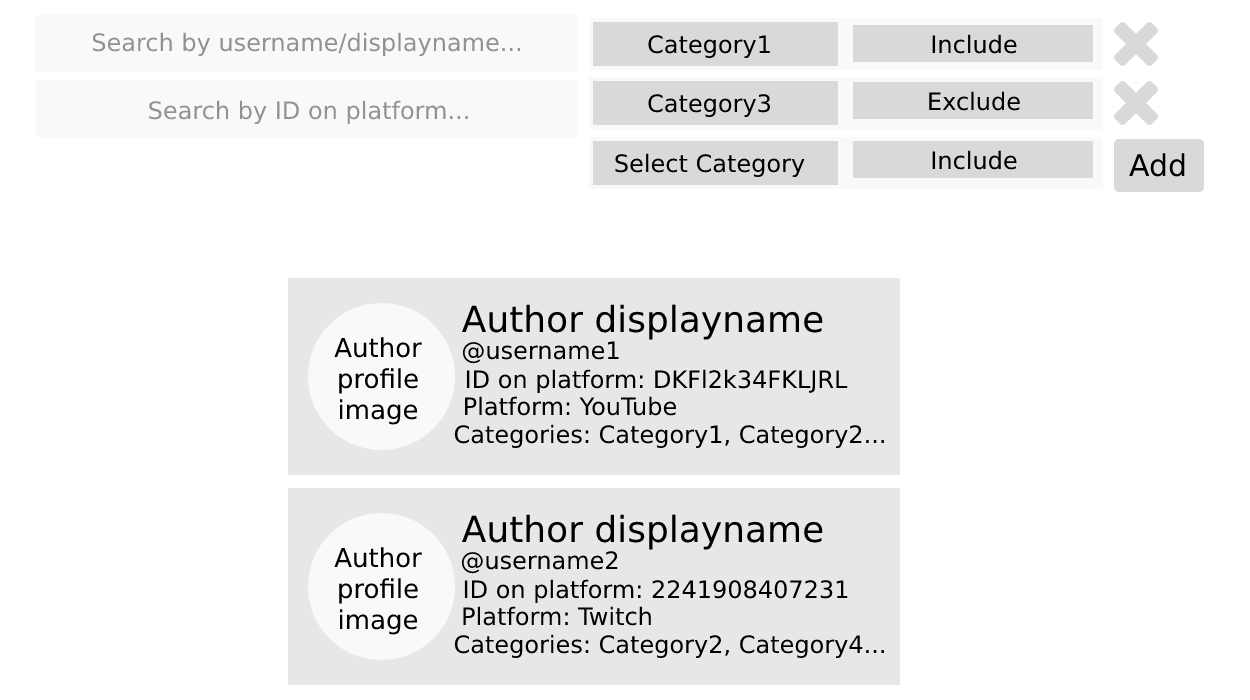
<style>
.page{position:relative;width:1250px;height:700px;background:#ffffff}
.page>*{position:absolute;margin:0}
.t1{font:24px "DejaVuSans";color:#929292}
.t2{font:24px "DejaVuSans";color:#000000}
.t3{font:30px "DejaVuSans";color:#000000}
.t4{font:36px "DejaVuSans";color:#000000}
.t5{font:26px "DejaVuSans";color:#000000}
</style>
<div class="page">
<p class="t1" style="left:92px;top:32px;width:429px;height:24px">Search by username/displayname...</p>
<p class="t2" style="left:648px;top:35px;width:122px;height:23px">Category1</p>
<p class="t2" style="left:932px;top:34px;width:85px;height:20px">Include</p>
<p class="t1" style="left:149px;top:100px;width:319px;height:24px">Search by ID on platform...</p>
<p class="t2" style="left:648px;top:94px;width:123px;height:23px">Category3</p>
<p class="t2" style="left:929px;top:91px;width:91px;height:20px">Exclude</p>
<p class="t2" style="left:932px;top:150px;width:85px;height:20px">Include</p>
<p class="t2" style="left:615px;top:153px;width:190px;height:24px">Select Category</p>
<p class="t3" style="left:1129px;top:153px;width:56px;height:24px">Add</p>
<p class="t4" style="left:461px;top:304px;width:362px;height:36px">Author displayname</p>
<p class="t5" style="left:334px;top:337px;width:88px;height:88px;text-align:center">Author<br>profile<br>image</p>
<p class="t2" style="left:462px;top:341px;width:157px;height:23px">@username1</p>
<p class="t2" style="left:466px;top:369px;width:382px;height:24px">ID on platform: DKFl2k34FKLJRL</p>
<p class="t2" style="left:465px;top:396px;width:211px;height:20px">Platform: YouTube</p>
<p class="t2" style="left:454px;top:424px;width:430px;height:24px">Categories: Category1, Category2...</p>
<p class="t4" style="left:461px;top:514px;width:362px;height:36px">Author displayname</p>
<p class="t5" style="left:334px;top:547px;width:88px;height:88px;text-align:center">Author<br>profile<br>image</p>
<p class="t2" style="left:461px;top:551px;width:157px;height:23px">@username2</p>
<p class="t2" style="left:464px;top:579px;width:384px;height:24px">ID on platform: 2241908407231</p>
<p class="t2" style="left:463px;top:606px;width:188px;height:20px">Platform: Twitch</p>
<p class="t2" style="left:454px;top:634px;width:430px;height:24px">Categories: Category2, Category4...</p>
</div>
